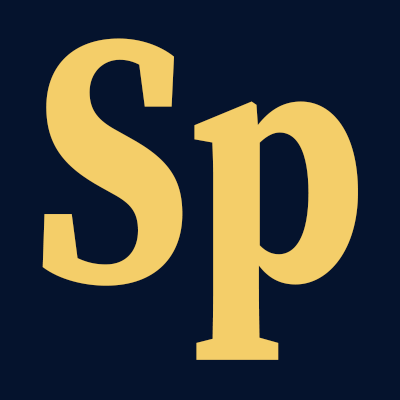
<style>
.page{position:relative;width:400px;height:400px;background:#05132d}
.page>*{position:absolute;margin:0}
.t1{font:355.8px "SourceSerifRoman-Bold";color:#f4ce69;scale:0.82 1}
</style>
<div class="page">
<p class="t1" style="left:42px;top:38px;width:316px;height:322px">Sp</p>
</div>
